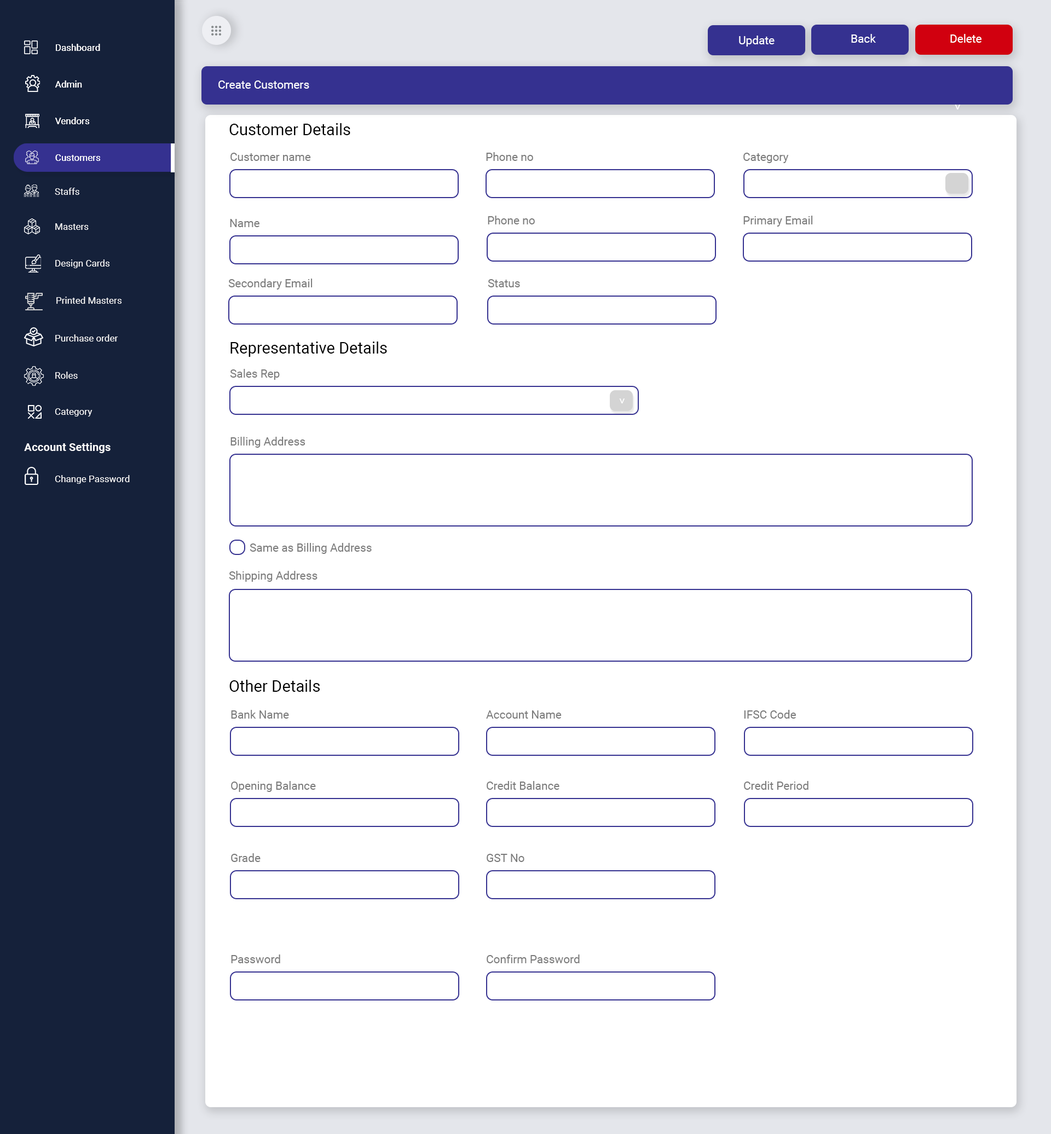
<style>
.page{position:relative;width:1051px;height:1134px;background:#ffffff}
.page>*{position:absolute;margin:0}
.t1{font:11.4px "Roboto-Regular";color:#ffffff}
.t2{font:9.3px "Roboto-Regular";color:#ffffff}
.t3{font:16px "Roboto-Regular";color:#000000}
.t4{font:11.4px "Roboto-Regular";color:#7b7b7b}
.t5{font:11.2px "Roboto-Bold";color:#ffffff}
</style>
<div class="page">
<p class="t1" style="left:739px;top:36px;width:36px;height:11px">Update</p>
<p class="t1" style="left:851px;top:34px;width:25px;height:9px">Back</p>
<p class="t1" style="left:950px;top:34px;width:32px;height:9px">Delete</p>
<p class="t2" style="left:56px;top:44px;width:44px;height:7px">Dashboard</p>
<p class="t2" style="left:56px;top:44px;width:44px;height:7px">Dashboard</p>
<p class="t2" style="left:55px;top:80px;width:27px;height:8px">Admin</p>
<p class="t2" style="left:55px;top:80px;width:27px;height:8px">Admin</p>
<p class="t1" style="left:218px;top:80px;width:91px;height:9px">Create Customers</p>
<p class="t1" style="left:955px;top:105px;width:5px;height:5px;rotate:90deg">&gt;</p>
<p class="t2" style="left:55px;top:117px;width:34px;height:7px">Vendors</p>
<p class="t2" style="left:55px;top:117px;width:34px;height:7px">Vendors</p>
<p class="t3" style="left:229px;top:123px;width:121px;height:12px">Customer Details</p>
<p class="t2" style="left:55px;top:154px;width:45px;height:7px">Customers</p>
<p class="t2" style="left:55px;top:154px;width:45px;height:7px">Customers</p>
<p class="t4" style="left:230px;top:153px;width:81px;height:8px">Customer name</p>
<p class="t4" style="left:486px;top:152px;width:47px;height:9px">Phone no</p>
<p class="t4" style="left:743px;top:153px;width:46px;height:10px">Category</p>
<p class="t2" style="left:55px;top:188px;width:24px;height:7px">Staffs</p>
<p class="t4" style="left:230px;top:219px;width:30px;height:8px">Name</p>
<p class="t4" style="left:488px;top:216px;width:47px;height:8px">Phone no</p>
<p class="t4" style="left:743px;top:216px;width:70px;height:11px">Primary Email</p>
<p class="t2" style="left:55px;top:223px;width:34px;height:7px">Masters</p>
<p class="t2" style="left:55px;top:260px;width:54px;height:8px">Design Cards</p>
<p class="t4" style="left:228px;top:279px;width:85px;height:11px">Secondary Email</p>
<p class="t4" style="left:488px;top:279px;width:32px;height:8px">Status</p>
<p class="t2" style="left:56px;top:297px;width:66px;height:7px">Printed Masters</p>
<p class="t2" style="left:55px;top:335px;width:63px;height:7px">Purchase order</p>
<p class="t3" style="left:230px;top:342px;width:157px;height:15px">Representative Details</p>
<p class="t2" style="left:55px;top:372px;width:23px;height:7px">Roles</p>
<p class="t4" style="left:230px;top:369px;width:50px;height:11px">Sales Rep</p>
<p class="t1" style="left:619px;top:399px;width:6px;height:5px;rotate:90deg">&gt;</p>
<p class="t2" style="left:55px;top:408px;width:38px;height:9px">Category</p>
<p class="t4" style="left:230px;top:437px;width:75px;height:11px">Billing Address</p>
<p class="t5" style="left:24px;top:443px;width:87px;height:10px">Account Settings</p>
<p class="t2" style="left:55px;top:475px;width:75px;height:9px">Change Password</p>
<p class="t4" style="left:250px;top:543px;width:122px;height:11px">Same as Billing Address</p>
<p class="t4" style="left:229px;top:571px;width:89px;height:11px">Shipping Address</p>
<p class="t3" style="left:229px;top:680px;width:91px;height:12px">Other Details</p>
<p class="t4" style="left:231px;top:710px;width:58px;height:9px">Bank Name</p>
<p class="t4" style="left:486px;top:711px;width:76px;height:8px">Account Name</p>
<p class="t4" style="left:744px;top:710px;width:52px;height:9px">IFSC Code</p>
<p class="t4" style="left:231px;top:781px;width:85px;height:11px">Opening Balance</p>
<p class="t4" style="left:487px;top:781px;width:73px;height:9px">Credit Balance</p>
<p class="t4" style="left:744px;top:781px;width:65px;height:9px">Credit Period</p>
<p class="t4" style="left:231px;top:854px;width:30px;height:8px">Grade</p>
<p class="t4" style="left:487px;top:854px;width:37px;height:8px">GST No</p>
<p class="t4" style="left:231px;top:955px;width:49px;height:9px">Password</p>
<p class="t4" style="left:487px;top:955px;width:93px;height:9px">Confirm Password</p>
</div>
